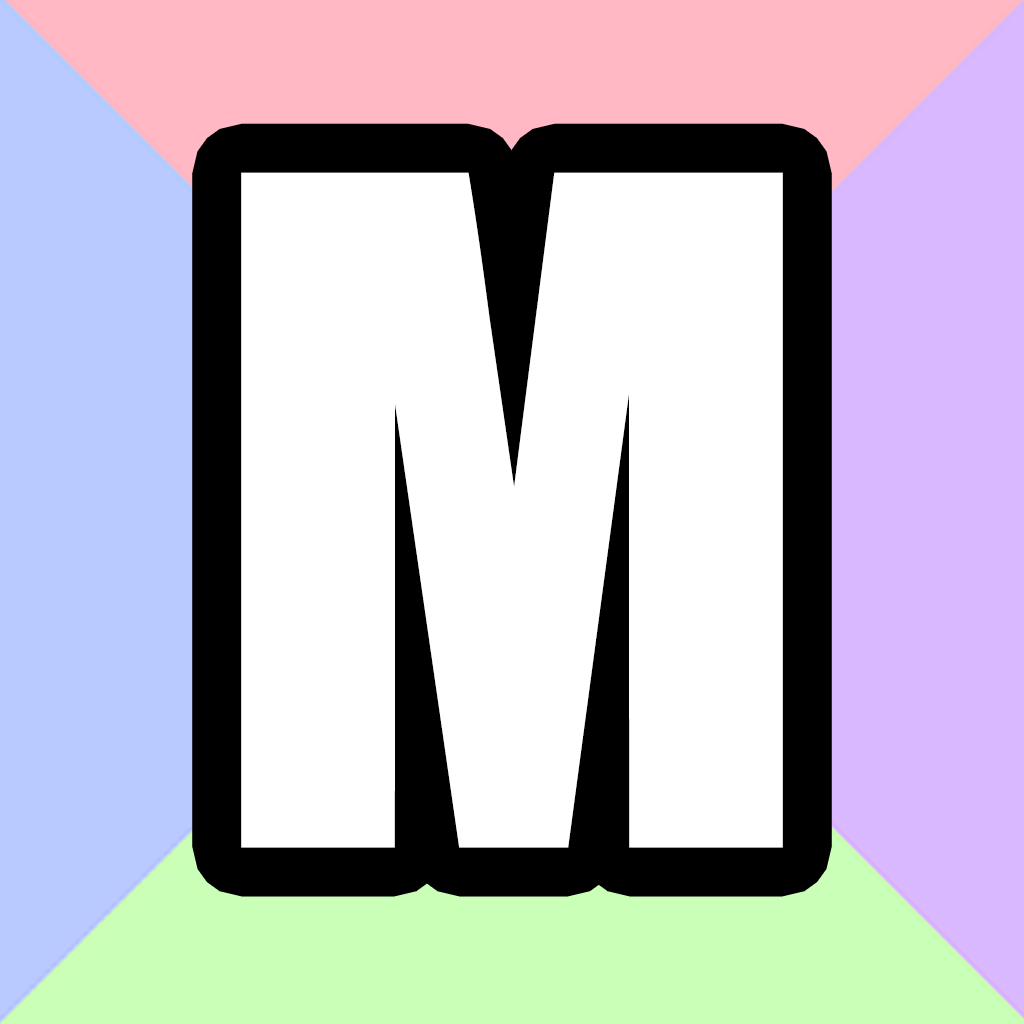
<style>
.page{position:relative;width:1024px;height:1024px;background:#ffffff}
.page>*{position:absolute;margin:0}
.t1{font:853.3px "Impact";letter-spacing:0.05em;color:#ffffff}
</style>
<div class="page">
<p class="t1" style="left:241px;top:172px;width:542px;height:676px">M</p>
</div>
